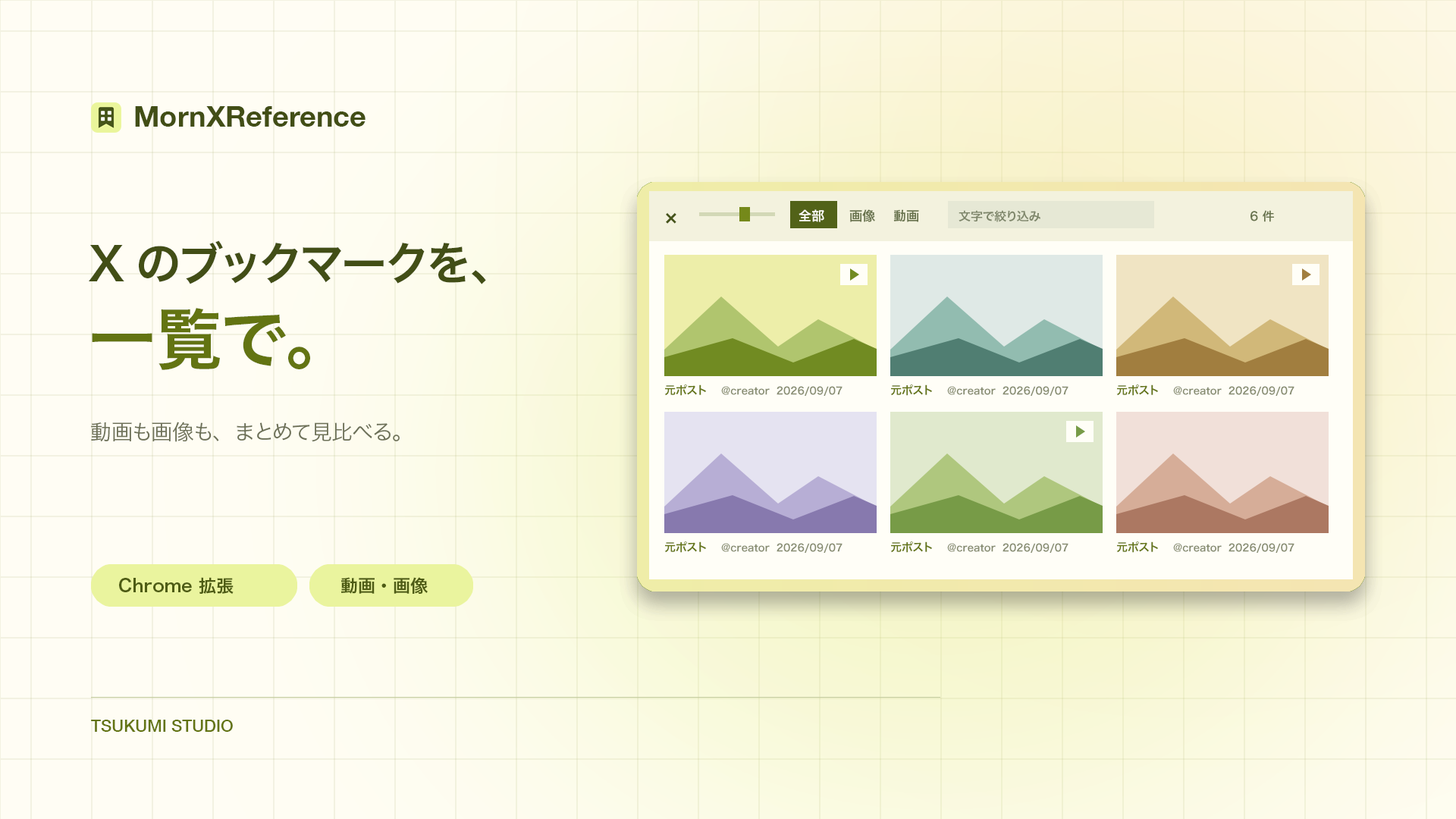
<style>
.page{position:relative;width:1456px;height:819px}
.page>*{position:absolute;margin:0}
.t1{font:28.8px "HelveticaNeue-Bold";color:#424e16}
.t2{font:12.9px "HiraginoSans-W6";color:#fffef7}
.t3{font:12.9px "HiraginoSans-W6";color:#68734d}
.t4{font:19.7px "HiraginoSans-W6";color:#46551a}
.t5{font:12.1px "HiraginoSans-W6";color:#7d8569}
.t6{font:12.1px "HiraginoSans-W6";color:#68734d}
.t7{font:45.5px "HiraginoSans-W6";color:#424e16}
.t8{font:66.7px "HiraginoSans-W6";color:#637412}
.t9{font:11.4px "HiraginoSans-W6";color:#657619}
.t10{font:9.9px "HiraginoSans-W6";color:#858b70}
.t11{font:21.2px "HiraginoSans-W3";color:#6c7057}
.t12{font:17.4px "HiraginoSans-W6";color:#4e5c14}
.t13{font:16.7px "HelveticaNeue-Medium";color:#637412}
</style>
<div class="page">
<p class="t1" style="left:135px;top:106px;width:231px;height:21px">MornXReference</p>
<p class="t2" style="left:799px;top:209px;width:25px;height:13px">全部</p>
<p class="t3" style="left:849px;top:209px;width:26px;height:13px">画像</p>
<p class="t3" style="left:893px;top:209px;width:26px;height:13px">動画</p>
<p class="t4" style="left:666px;top:212px;width:10px;height:12px">×</p>
<p class="t5" style="left:959px;top:210px;width:81px;height:12px">文字で絞り込み</p>
<p class="t6" style="left:1250px;top:210px;width:24px;height:12px">6 件</p>
<p class="t7" style="left:89px;top:240px;width:397px;height:44px">Xのブックマークを、</p>
<p class="t8" style="left:92px;top:308px;width:218px;height:62px">一覧で。</p>
<p class="t9" style="left:664px;top:384px;width:42px;height:12px">元ポスト</p>
<p class="t10" style="left:721px;top:386px;width:121px;height:10px">@creator  2026/09/07</p>
<p class="t9" style="left:890px;top:384px;width:42px;height:12px">元ポスト</p>
<p class="t10" style="left:947px;top:386px;width:121px;height:10px">@creator  2026/09/07</p>
<p class="t9" style="left:1116px;top:384px;width:42px;height:12px">元ポスト</p>
<p class="t10" style="left:1173px;top:386px;width:121px;height:10px">@creator  2026/09/07</p>
<p class="t11" style="left:91px;top:422px;width:309px;height:20px">動画も画像も、まとめて見比べる。</p>
<p class="t9" style="left:664px;top:541px;width:42px;height:12px">元ポスト</p>
<p class="t10" style="left:721px;top:543px;width:121px;height:10px">@creator  2026/09/07</p>
<p class="t9" style="left:890px;top:541px;width:42px;height:12px">元ポスト</p>
<p class="t10" style="left:947px;top:543px;width:121px;height:10px">@creator  2026/09/07</p>
<p class="t9" style="left:1116px;top:541px;width:42px;height:12px">元ポスト</p>
<p class="t10" style="left:1173px;top:543px;width:121px;height:10px">@creator  2026/09/07</p>
<p class="t12" style="left:119px;top:577px;width:115px;height:18px">Chrome 拡張</p>
<p class="t12" style="left:340px;top:577px;width:88px;height:17px">動画・画像</p>
<p class="t13" style="left:91px;top:720px;width:142px;height:12px">TSUKUMI STUDIO</p>
</div>
